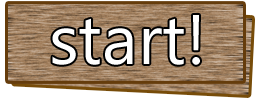
<style>
.page{position:relative;width:256px;height:100px}
.page>*{position:absolute;margin:0}
.t1{font:70px "SegoeUI";color:#ffffff}
</style>
<div class="page">
<p class="t1" style="left:52px;top:15px;width:148px;height:50px">start!</p>
</div>
